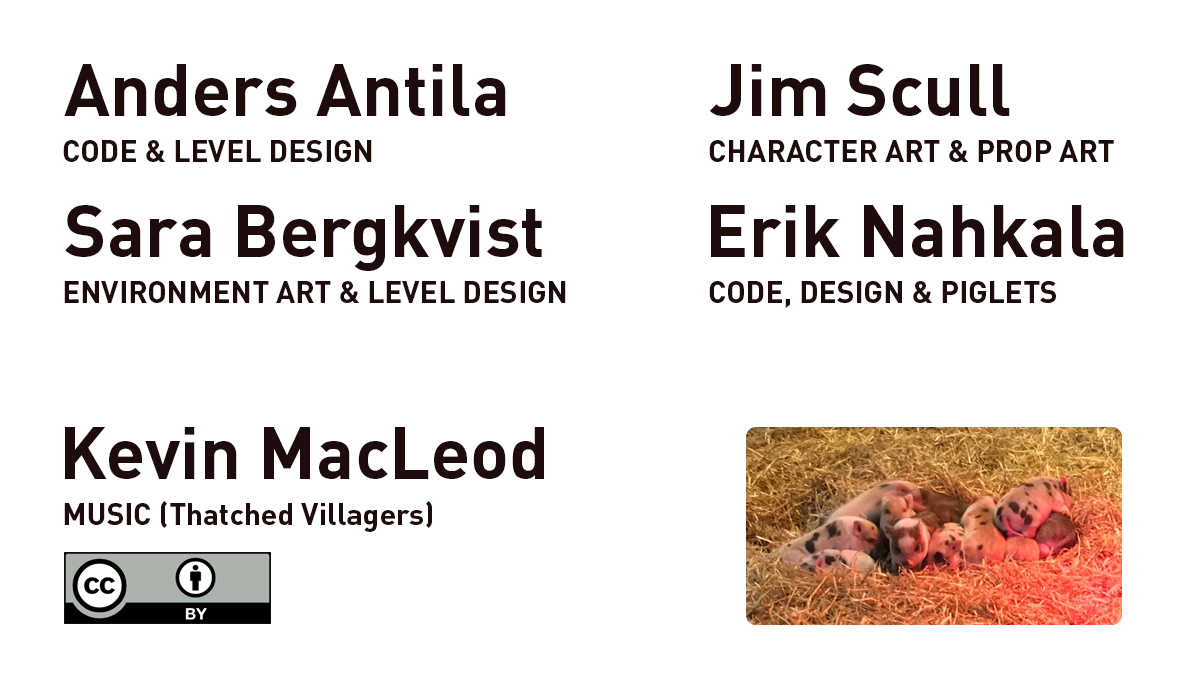
<style>
.page{position:relative;width:1200px;height:700px;background:#ffffff}
.page>*{position:absolute;margin:0}
.t1{font:72px "DINPro-Bold";color:#1e0b0b}
.t2{font:30px "DINPro-Bold";color:#1e0b0b}
</style>
<div class="page">
<p class="t1" style="left:64px;top:64px;width:442px;height:52px">Anders Antila</p>
<p class="t1" style="left:710px;top:64px;width:300px;height:52px">Jim Scull</p>
<p class="t2" style="left:63px;top:140px;width:309px;height:22px">CODE &amp; LEVEL DESIGN</p>
<p class="t2" style="left:709px;top:140px;width:405px;height:22px">CHARACTER ART &amp; PROP ART</p>
<p class="t1" style="left:65px;top:205px;width:477px;height:66px">Sara Bergkvist</p>
<p class="t1" style="left:711px;top:205px;width:413px;height:52px">Erik Nahkala</p>
<p class="t2" style="left:64px;top:281px;width:502px;height:22px">ENVIRONMENT ART &amp; LEVEL DESIGN</p>
<p class="t2" style="left:709px;top:281px;width:347px;height:27px">CODE, DESIGN &amp; PIGLETS</p>
<p class="t1" style="left:65px;top:427px;width:479px;height:52px">Kevin MacLeod</p>
<p class="t2" style="left:64px;top:501px;width:368px;height:31px">MUSIC (Thatched Villagers)</p>
</div>
